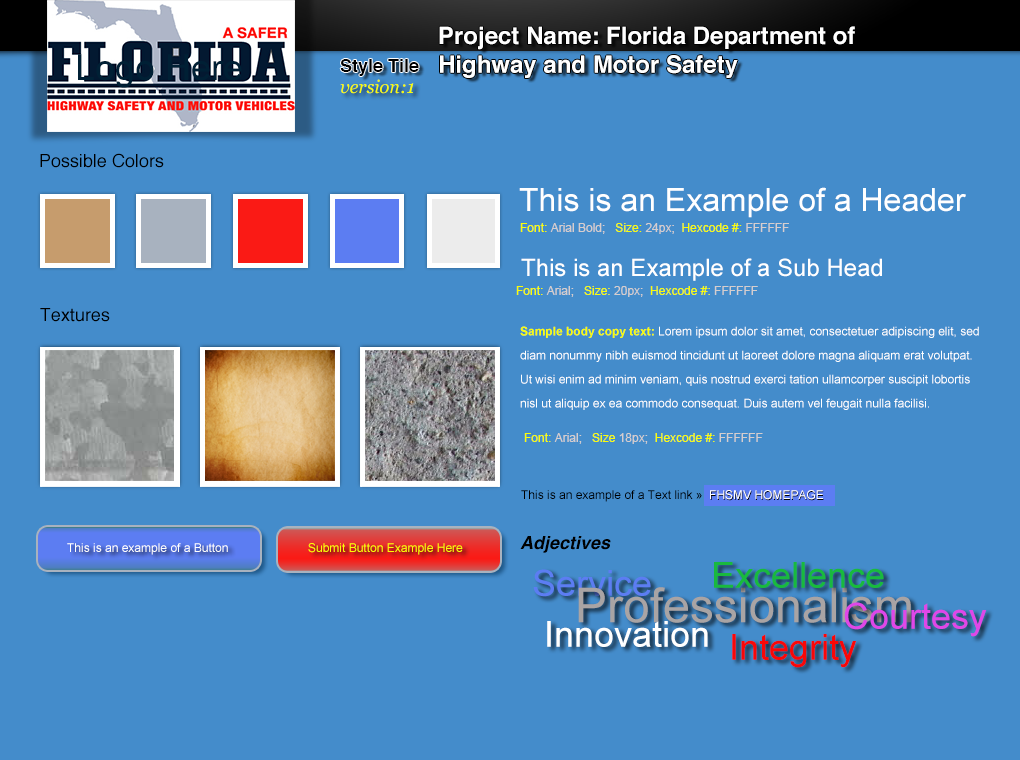
<style>
.page{position:relative;width:1020px;height:760px;background:#448ccb}
.page>*{position:absolute;margin:0}
.t1{font:24px "Helvetica-Bold";color:#ffffff}
.t2{font:36px "ArialMT";color:#002035}
.t3{font:18px "Helvetica-Bold";color:#000000}
.t4{font:18px "Georgia-Italic";color:#fafd06}
.t5{font:18px "Helvetica";color:#000000}
.t6{font:32px "ArialMT";color:#ffffff}
.t7{font:12px "ArialMT";color:#d6cece}
.t8{font:12px "ArialMT";color:#fafd06}
.t9{font:24px "ArialMT";color:#ffffff}
.t10{font:12px "ArialMT";color:#d5cece}
.t11{font:12px/24px "ArialMT";color:#ffffff}
.t12{font:12px/24px "Arial-BoldMT";color:#fafd06}
.t13{font:12px "ArialMT";color:#000000}
.t14{font:12px "ArialMT";color:#ffffff}
.t15{font:12px "ArialMT"}
.t16{font:18px "Helvetica-BoldOblique";color:#000000}
.t17{font:36px "ArialMT";color:#5c7df2}
.t18{font:36px "ArialMT";color:#19b93e}
.t19{font:48px "ArialMT";color:#a9a4a4}
.t20{font:36px "ArialMT";color:#df47e8}
.t21{font:36px "ArialMT";color:#ffffff}
.t22{font:36px "ArialMT";color:#f90707}
</style>
<div class="page">
<p class="t1" style="left:439px;top:26px;width:416px;height:52px">Project Name: Florida Department of<br>Highway and Motor Safety</p>
<p class="t2" style="left:78px;top:54px;width:164px;height:34px">Logo Here</p>
<p class="t3" style="left:340px;top:59px;width:79px;height:17px">Style Tile</p>
<p class="t4" style="left:340px;top:79px;width:74px;height:15px">version:1</p>
<p class="t5" style="left:40px;top:153px;width:124px;height:15px">Possible Colors</p>
<p class="t6" style="left:519px;top:187px;width:447px;height:31px">This is an Example of a Header</p>
<p class="t7" style="left:520px;top:223px;width:269px;height:11px"><span class="t8">Font:</span> Arial Bold;   <span class="t8">Size:</span> 24px;  <span class="t8">Hexcode #:</span> FFFFFF</p>
<p class="t9" style="left:521px;top:258px;width:361px;height:23px">This is an Example of a Sub Head</p>
<p class="t8" style="left:516px;top:286px;width:242px;height:11px">Font:<span class="t10"> Arial;   </span>Size:<span class="t10"> 20px;  </span>Hexcode #:<span class="t10"> FFFFFF</span></p>
<p class="t5" style="left:40px;top:308px;width:70px;height:14px">Textures</p>
<p class="t11" style="left:520px;top:326px;width:459px;height:84px"><span class="t12">Sample body copy text:</span> Lorem ipsum dolor sit amet, consectetuer adipiscing elit, sed diam nonummy nibh euismod tincidunt ut laoreet dolore magna aliquam erat volutpat. Ut wisi enim ad minim veniam, quis nostrud exerci tation ullamcorper suscipit lobortis nisl ut aliquip ex ea commodo consequat. Duis autem vel feugait nulla facilisi.</p>
<p class="t8" style="left:524px;top:433px;width:239px;height:11px">Font:<span class="t10"> Arial;   </span>Size<span class="t10"> 18px;  </span>Hexcode #:<span class="t10"> FFFFFF</span></p>
<p class="t13" style="left:521px;top:490px;width:302px;height:12px">This is an example of a Text link »  <span class="t14">FHSMV HOMEPAGE</span></p>
<p class="t15" style="left:710px;top:491px;width:114px;height:10px">FHSMV HOMEPAGE</p>
<p class="t14" style="left:67px;top:543px;width:161px;height:12px">This is an example of a Button</p>
<p class="t8" style="left:308px;top:543px;width:155px;height:12px">Submit Button Example Here</p>
<p class="t16" style="left:520px;top:536px;width:91px;height:17px">Adjectives</p>
<p class="t17" style="left:533px;top:569px;width:118px;height:28px">Service</p>
<p class="t18" style="left:714px;top:562px;width:170px;height:26px">Excellence</p>
<p class="t19" style="left:578px;top:587px;width:333px;height:36px">Professionalism</p>
<p class="t20" style="left:844px;top:602px;width:143px;height:35px">Courtesy</p>
<p class="t21" style="left:547px;top:621px;width:161px;height:26px">Innovation</p>
<p class="t22" style="left:732px;top:634px;width:125px;height:34px">Integrity</p>
</div>
